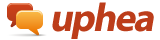
<style>
.page{position:relative;width:160px;height:40px;background:#ffffff}
.page>*{position:absolute;margin:0}
.t1{font:40px "MyriadPro-Bold";letter-spacing:-0.05em;color:#bc3d1a;font-style:italic}
</style>
<div class="page">
<p class="t1" style="left:52px;top:2px;width:102px;height:37px">uphea</p>
</div>
